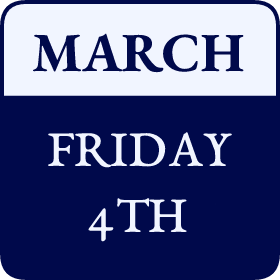
<style>
.page{position:relative;width:280px;height:280px;background:#00094b}
.page>*{position:absolute;margin:0}
.t1{font:55px "EBGaramond-Bold";color:#00094b}
.t2{font:55px "EBGaramondSC08-Regular";color:#f1f5ff}
</style>
<div class="page">
<p class="t1" style="left:32px;top:33px;width:212px;height:40px">MARCH</p>
<p class="t2" style="left:48px;top:132px;width:184px;height:110px;text-align:center">FRIDAY<br>4TH</p>
</div>
